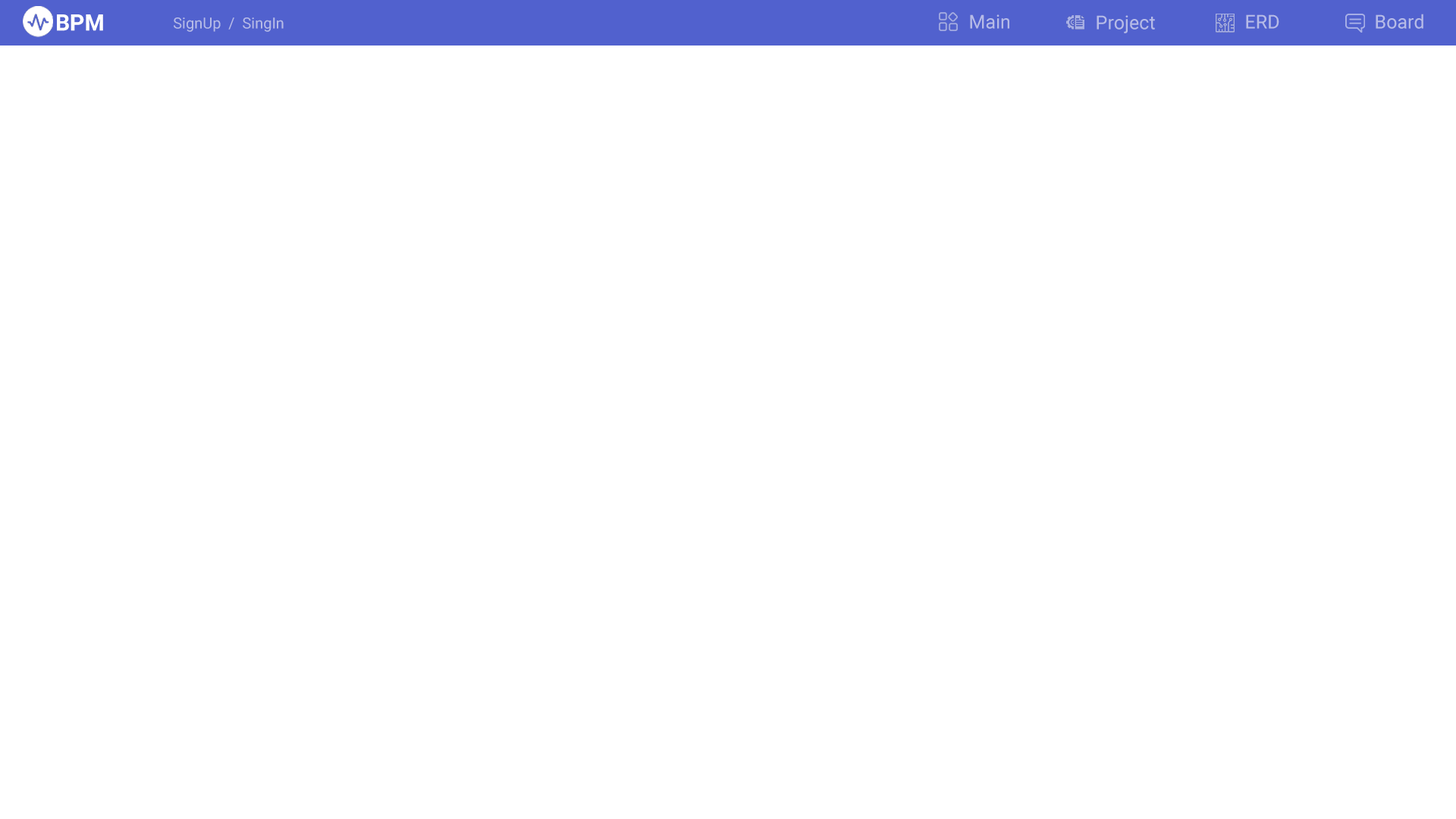
<style>
.page{position:relative;width:1456px;height:819px;background:#ffffff}
.page>*{position:absolute;margin:0}
.t1{font:22.7px "Roboto-Bold";color:#ffffff}
.t2{font:15.2px "Roboto-Regular";color:#b6bbe7}
.t3{font:19px "Roboto-Regular";color:#b6bbe7}
</style>
<div class="page">
<p class="t1" style="left:57px;top:14px;width:46px;height:17px">BPM</p>
<p class="t2" style="left:174px;top:17px;width:110px;height:15px">SignUp  /  SingIn</p>
<p class="t3" style="left:970px;top:14px;width:39px;height:15px">Main</p>
<p class="t3" style="left:1097px;top:15px;width:58px;height:18px">Project</p>
<p class="t3" style="left:1246px;top:14px;width:33px;height:15px">ERD</p>
<p class="t3" style="left:1376px;top:14px;width:47px;height:15px">Board</p>
</div>
